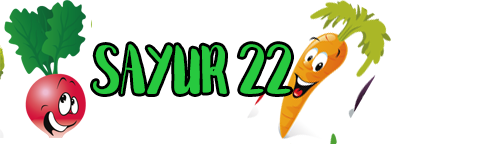
<style>
.page{position:relative;width:487px;height:144px;background:#ffffff}
.page>*{position:absolute;margin:0}
.t1{font:54.2px "StayBold";color:#27c93f}
</style>
<div class="page">
<p class="t1" style="left:93px;top:44px;width:198px;height:50px">SAYUR 22</p>
</div>
